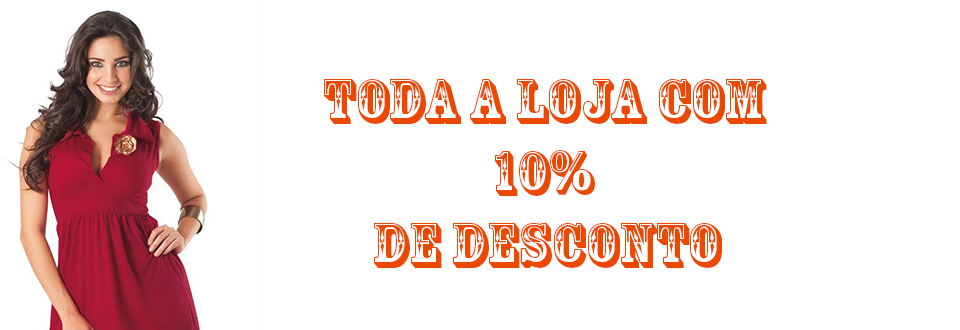
<style>
.page{position:relative;width:960px;height:330px;background:#ffffff}
.page>*{position:absolute;margin:0}
.t1{font:60px "RosewoodStd-Regular";color:#eb4800}
</style>
<div class="page">
<p class="t1" style="left:324px;top:79px;width:443px;height:189px;text-align:center">TODA A LOJA COM <br>10% <br>DE DESCONTO</p>
</div>
